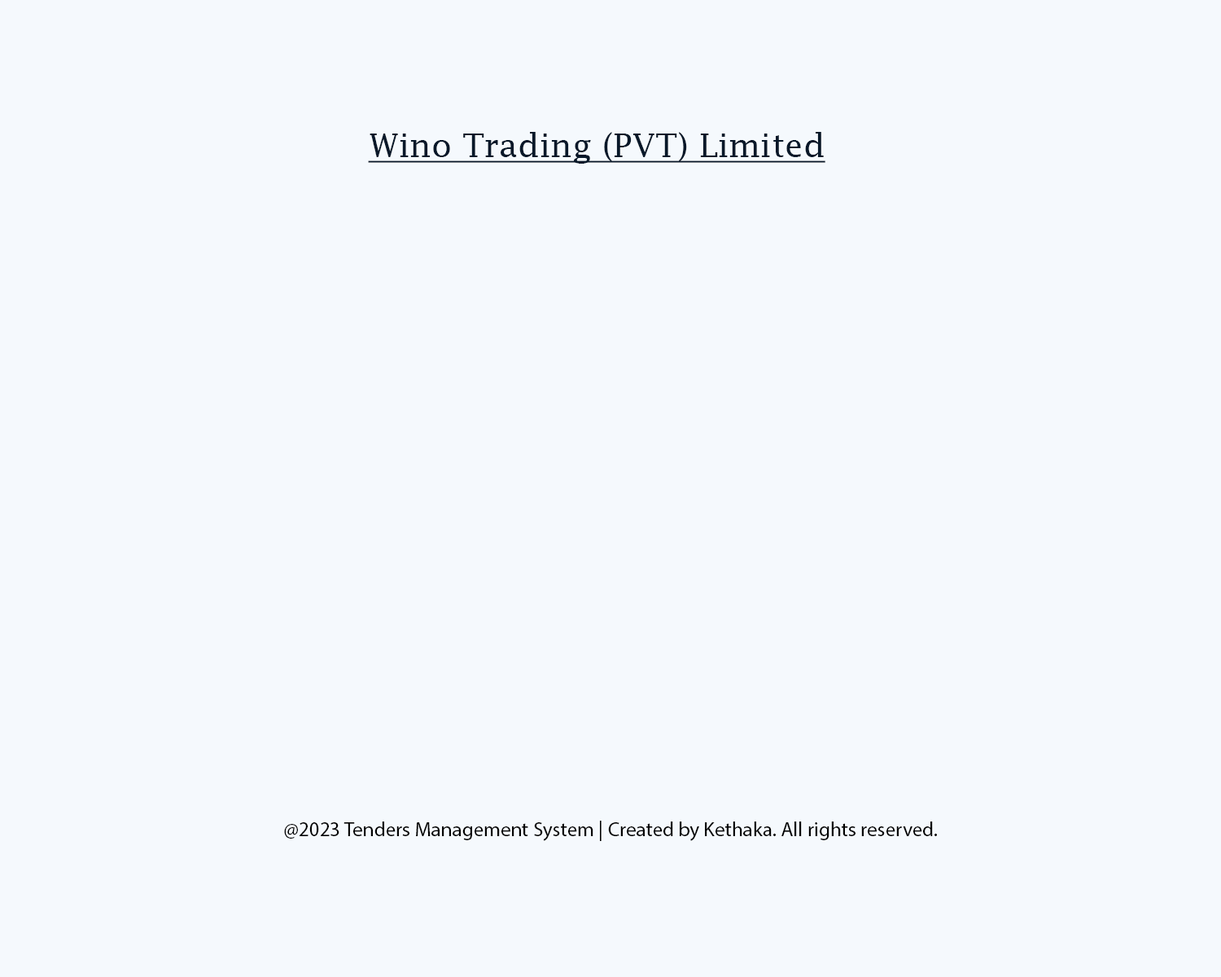
<style>
.page{position:relative;width:1221px;height:977px;background:#f5f9fd}
.page>*{position:absolute;margin:0}
.t1{font:32.8px "LucidaFax";color:#081829;text-decoration:underline}
.t2{font:20.3px "MyriadPro-Regular";color:#000000}
</style>
<div class="page">
<p class="t1" style="left:368px;top:132px;width:457px;height:32px">Wino Trading (PVT) Limited</p>
<p class="t2" style="left:284px;top:820px;width:653px;height:21px">@2023 Tenders Management System | Created by Kethaka. All rights reserved.</p>
</div>
